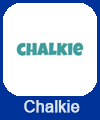
<style>
.page{position:relative;width:100px;height:120px;background:#ffffff}
.page>*{position:absolute;margin:0}
.t1{font:16px "ArialMT";color:#d8e3ed;font-weight:bold}
</style>
<div class="page">
<p class="t1" style="left:24px;top:100px;width:56px;height:13px">Chalkie</p>
</div>
